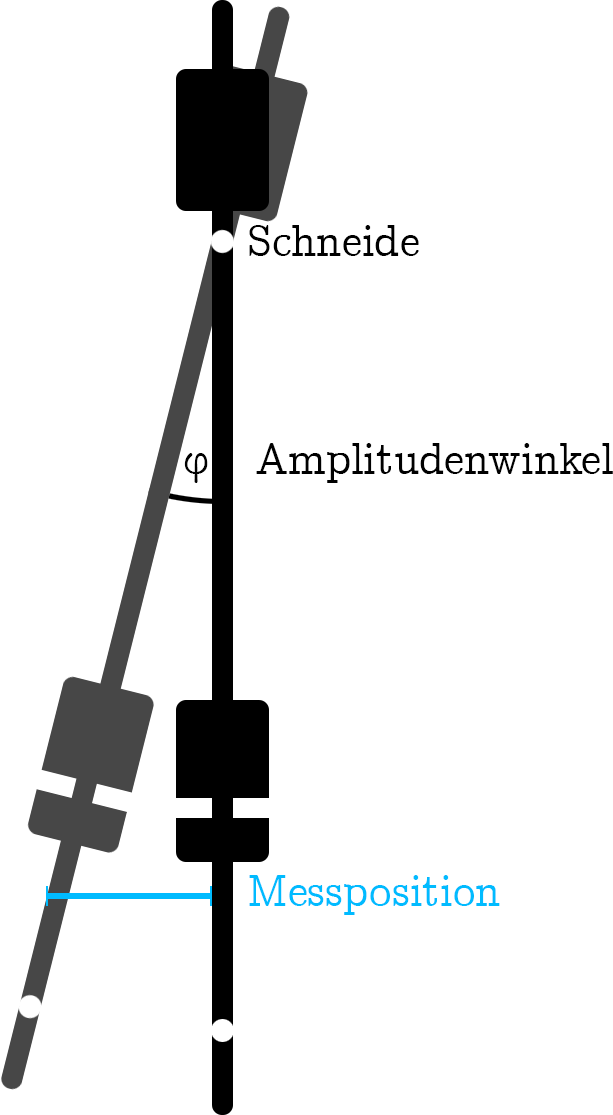
<style>
.page{position:relative;width:613px;height:1115px;background:#ffffff}
.page>*{position:absolute;margin:0}
.t1{font:45px "CMUConcrete-Roman";color:#000000}
.t2{font:45px "CMUConcrete-Roman";color:#00bbff}
</style>
<div class="page">
<p class="t1" style="left:249px;top:225px;width:170px;height:31px">Schneide</p>
<p class="t1" style="left:184px;top:443px;width:429px;height:40px">φ  Amplitudenwinkel</p>
<p class="t2" style="left:249px;top:875px;width:251px;height:40px">Messposition</p>
</div>
